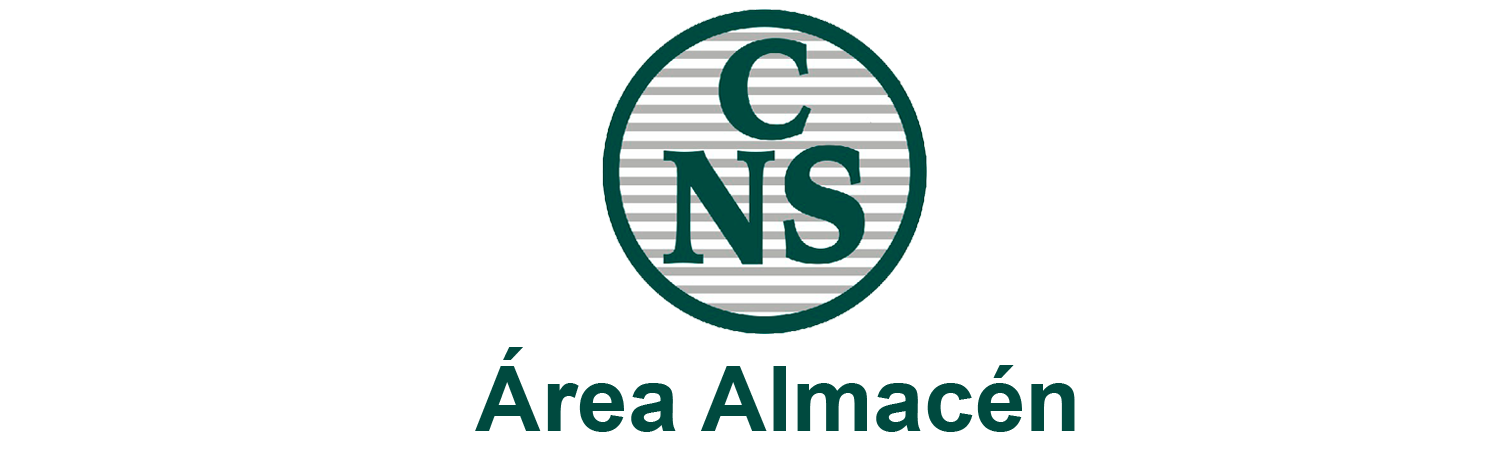
<style>
.page{position:relative;width:1500px;height:457px;background:#ffffff}
.page>*{position:absolute;margin:0}
.t1{font:91.3px "Arial-BoldMT";color:#004a3f}
</style>
<div class="page">
<p class="t1" style="left:475px;top:347px;width:600px;height:85px">Área Almacén</p>
</div>
